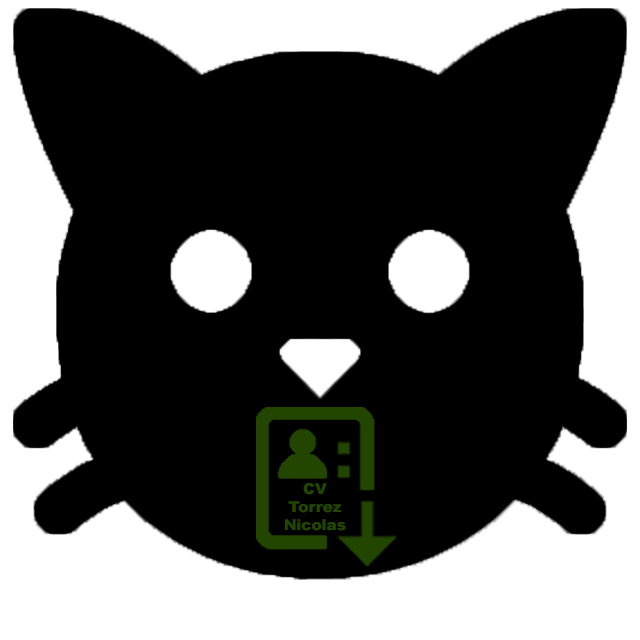
<style>
.page{position:relative;width:640px;height:640px;background:#000000}
.page>*{position:absolute;margin:0}
.t1{font:15px "Arial-Black";color:#224500}
</style>
<div class="page">
<p class="t1" style="left:285px;top:483px;width:61px;height:48px;text-align:center">CV<br>Torrez<br>Nicolas</p>
</div>
